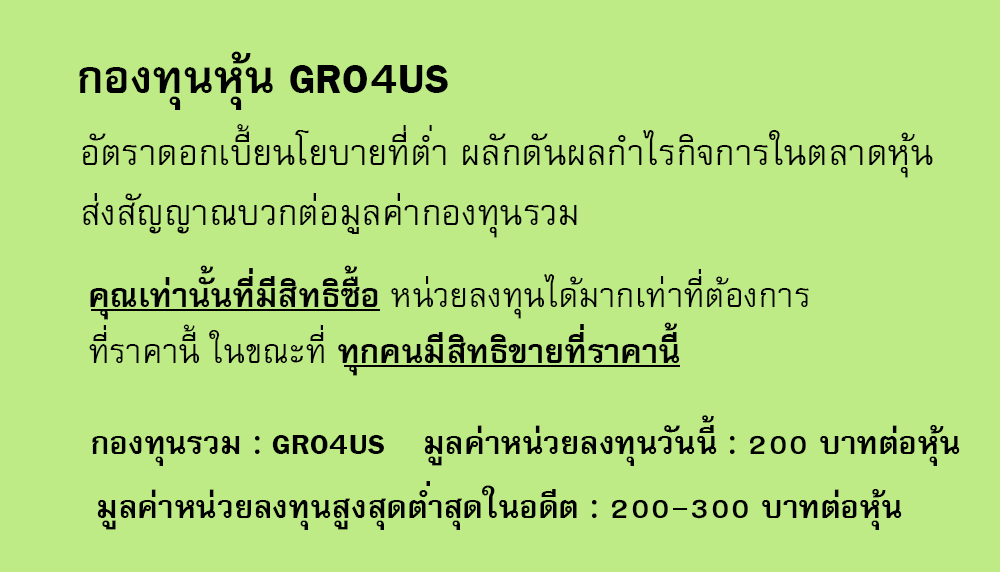
<style>
.page{position:relative;width:1000px;height:572px;background:#beeb85}
.page>*{position:absolute;margin:0}
.t1{font:64px "FreesiaUPCBold";color:#000000}
.t2{font:50px/60px "FreesiaUPC";color:#000000}
.t3{font:47px "FreesiaUPC";color:#000000}
.t4{font:47px "FreesiaUPCBold";color:#000000}
.t5{font:45px "FreesiaUPCBold";color:#000000}
</style>
<div class="page">
<p class="t1" style="left:79px;top:51px;width:369px;height:59px">กองทุนหุ้น GRO4US</p>
<p class="t2" style="left:82px;top:124px;width:851px;height:114px">อัตราดอกเบี้ยนโยบายที่ต่ำ ผลักดันผลกำไรกิจการในตลาดหุ้น<br>ส่งสัญญาณบวกต่อมูลค่ากองทุนรวม</p>
<p class="t3" style="left:89px;top:265px;width:720px;height:111px"><span class="t4">คุณเท่านั้นที่มีสิทธิซื้อ </span>หน่วยลงทุนได้มากเท่าที่ต้องการ<br>ที่ราคานี้ ในขณะที่<span class="t4"> ทุกคนมีสิทธิขายที่ราคานี้</span></p>
<p class="t5" style="left:424px;top:415px;width:536px;height:51px">มูลค่าหน่วยลงทุนวันนี้ : 200 บาทต่อหุ้น</p>
<p class="t5" style="left:92px;top:435px;width:292px;height:31px">กองทุนรวม : GRO4US</p>
<p class="t5" style="left:97px;top:481px;width:805px;height:49px">มูลค่าหน่วยลงทุนสูงสุดต่ำสุดในอดีต : 200-300 บาทต่อหุ้น</p>
</div>
